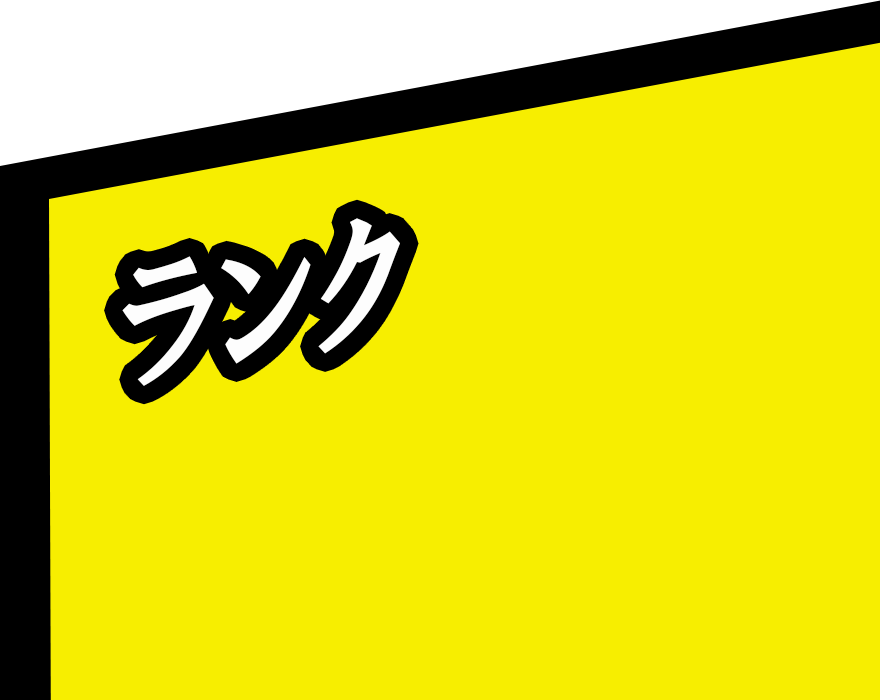
<style>
.page{position:relative;width:880px;height:700px;background:#f7ee00}
.page>*{position:absolute;margin:0}
.t1{font:150.7px "HGPSoeiPresenceEB";color:#fdfdfd;scale:0.8 1}
</style>
<div class="page">
<p class="t1" style="left:122px;top:218px;width:278px;height:168px;rotate:-11deg">ランク</p>
</div>
